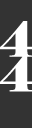
<style>
.page{position:relative;width:32px;height:128px;background:#333333}
.page>*{position:absolute;margin:0}
.t1{font:48px/34.7px "Elephant-Regular";color:#ffffff;text-transform:uppercase;font-weight:bold}
</style>
<div class="page">
<p class="t1" style="left:0px;top:21px;width:33px;height:71px;text-align:center">4<br>4</p>
</div>
